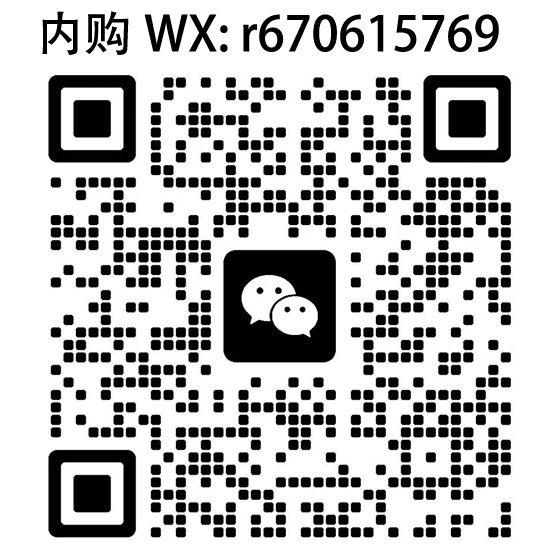
<style>
.page{position:relative;width:560px;height:560px;background:#ffffff}
.page>*{position:absolute;margin:0}
.t1{font:48px "AdobeHeitiStd-Regular";color:#000000}
</style>
<div class="page">
<p class="t1" style="left:42px;top:11px;width:457px;height:44px">内购WX: r670615769</p>
</div>
